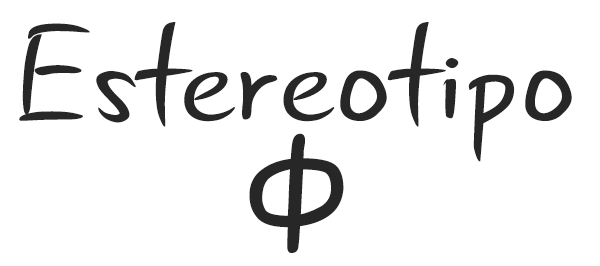
<style>
.page{position:relative;width:600px;height:266px;background:#ffffff}
.page>*{position:absolute;margin:0}
.t1{font:140px/105px "GunnyRewritten";color:#272727;scale:1.1 1}
.t2{font:180px/105px "GunnyRewritten";color:#272727;scale:1.1 1}
.t3{font:140px/130px "GunnyRewritten";color:#272727;scale:1.1 1}
</style>
<div class="page">
<p class="t1" style="left:19px;top:22px;width:553px;height:231px;text-align:center">Estereotipo<br><span class="t2">ф<br></span><span class="t3"></span></p>
</div>
